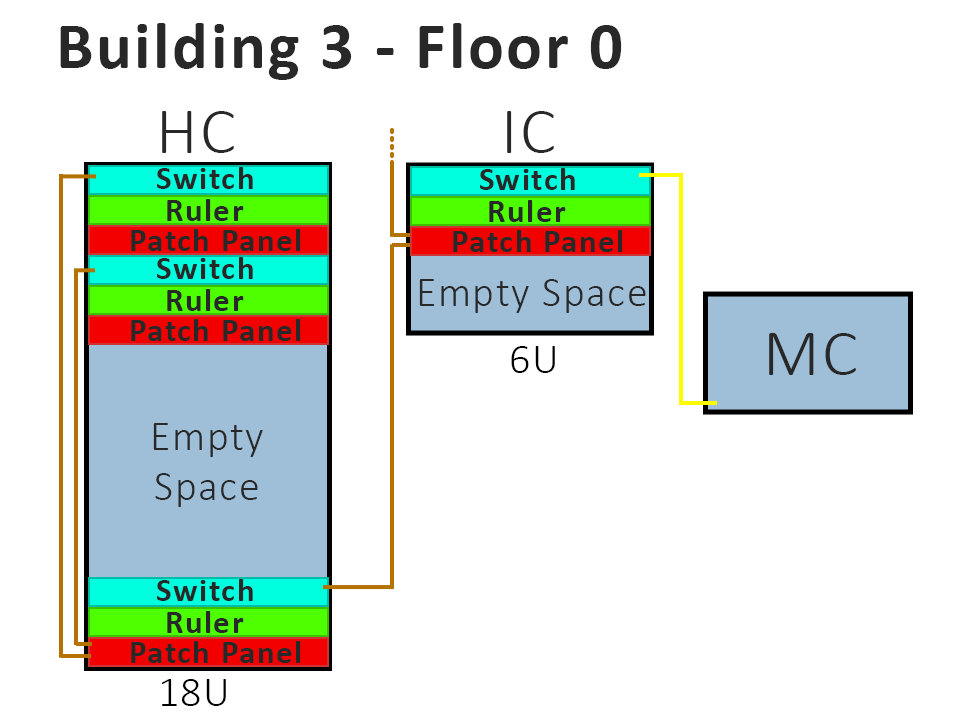
<style>
.page{position:relative;width:956px;height:717px;background:#ffffff}
.page>*{position:absolute;margin:0}
.t1{font:66.7px "Calibri-Bold";letter-spacing:0.04em;color:#282828}
.t2{font:66.7px "Calibri-Light";letter-spacing:0.04em;color:#282828}
.t3{font:33.3px "Calibri-Bold";letter-spacing:0.04em;color:#282828}
.t4{font:41.7px "Calibri-Light";letter-spacing:0.04em;color:#282828}
.t5{font:41.7px "Calibri-Light";letter-spacing:0.04em;color:#000000}
</style>
<div class="page">
<p class="t1" style="left:60px;top:23px;width:562px;height:57px">Building 3 - Floor 0</p>
<p class="t2" style="left:162px;top:111px;width:72px;height:42px">HC</p>
<p class="t2" style="left:507px;top:111px;width:47px;height:42px">IC</p>
<p class="t3" style="left:157px;top:167px;width:96px;height:22px">Switch</p>
<p class="t3" style="left:480px;top:168px;width:95px;height:22px">Switch</p>
<p class="t3" style="left:167px;top:199px;width:77px;height:22px">Ruler</p>
<p class="t3" style="left:489px;top:200px;width:77px;height:22px">Ruler</p>
<p class="t3" style="left:131px;top:229px;width:170px;height:22px">Patch Panel</p>
<p class="t3" style="left:453px;top:230px;width:170px;height:22px">Patch Panel</p>
<p class="t3" style="left:157px;top:257px;width:96px;height:22px">Switch</p>
<p class="t4" style="left:419px;top:279px;width:227px;height:34px">Empty Space</p>
<p class="t3" style="left:167px;top:289px;width:77px;height:22px">Ruler</p>
<p class="t3" style="left:131px;top:319px;width:170px;height:22px">Patch Panel</p>
<p class="t2" style="left:769px;top:333px;width:87px;height:42px">MC</p>
<p class="t5" style="left:511px;top:346px;width:44px;height:27px">6U</p>
<p class="t4" style="left:153px;top:423px;width:110px;height:84px;text-align:center">Empty<br>Space</p>
<p class="t3" style="left:157px;top:579px;width:96px;height:22px">Switch</p>
<p class="t3" style="left:167px;top:611px;width:77px;height:22px">Ruler</p>
<p class="t3" style="left:131px;top:641px;width:170px;height:22px">Patch Panel</p>
<p class="t5" style="left:161px;top:679px;width:65px;height:27px">18U</p>
</div>
